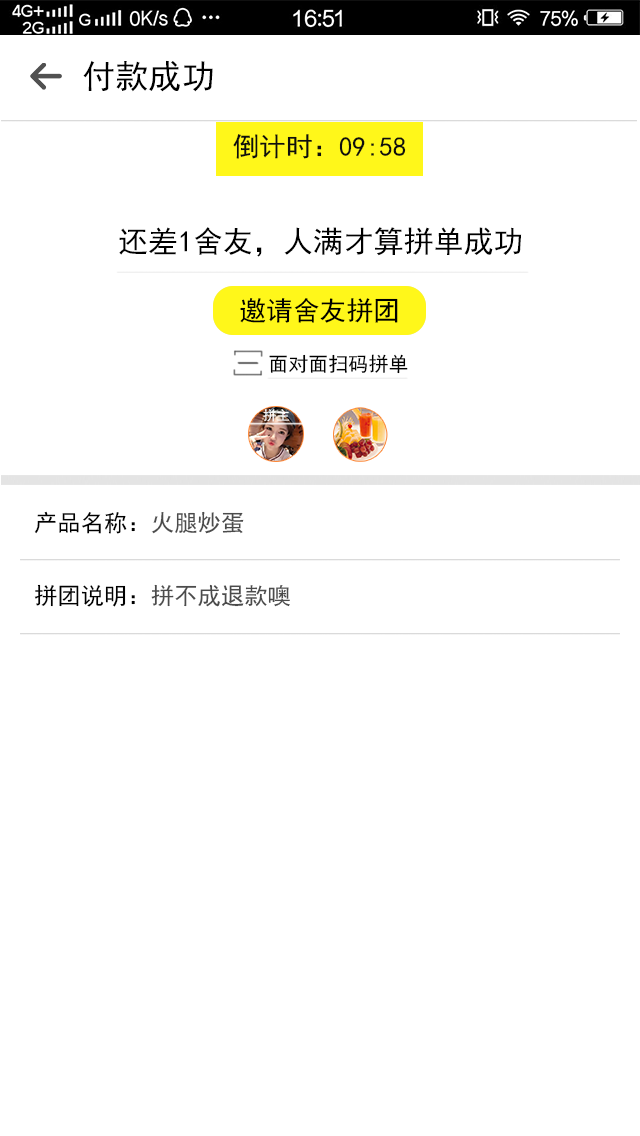
<style>
.page{position:relative;width:640px;height:1136px;background:#ffffff}
.page>*{position:absolute;margin:0}
.t1{font:33.3px "SimHei";letter-spacing:0.002em;color:#000000}
.t2{font:26.7px "SimHei";letter-spacing:0.002em;color:#0e0e0e}
.t3{font:30px "SimHei";letter-spacing:0.002em;color:#000000}
.t4{font:26.7px "SimHei";letter-spacing:0.002em;color:#000000}
.t5{font:20px "SimHei";letter-spacing:0.002em;color:#000000}
.t6{font:13.3px "SimHei";letter-spacing:0.002em;color:#ffffff}
.t7{font:23.3px "SimHei";letter-spacing:0.002em;color:#000000}
.t8{font:23.3px "SimHei";letter-spacing:0.002em;color:#4b4b4b}
</style>
<div class="page">
<p class="t1" style="left:83px;top:60px;width:130px;height:32px">付款成功</p>
<p class="t2" style="left:233px;top:134px;width:173px;height:25px">倒计时：09:58</p>
<p class="t3" style="left:119px;top:227px;width:403px;height:30px">还差1舍友，人满才算拼单成功</p>
<p class="t4" style="left:240px;top:298px;width:158px;height:25px">邀请舍友拼团</p>
<p class="t5" style="left:269px;top:354px;width:139px;height:20px">面对面扫码拼单</p>
<p class="t6" style="left:263px;top:409px;width:27px;height:13px">拼主</p>
<p class="t7" style="left:34px;top:511px;width:210px;height:23px">产品名称：<span class="t8">火腿炒蛋</span></p>
<p class="t8" style="left:34px;top:584px;width:256px;height:23px"><span class="t7">拼团说明：</span>拼不成退款噢</p>
</div>
